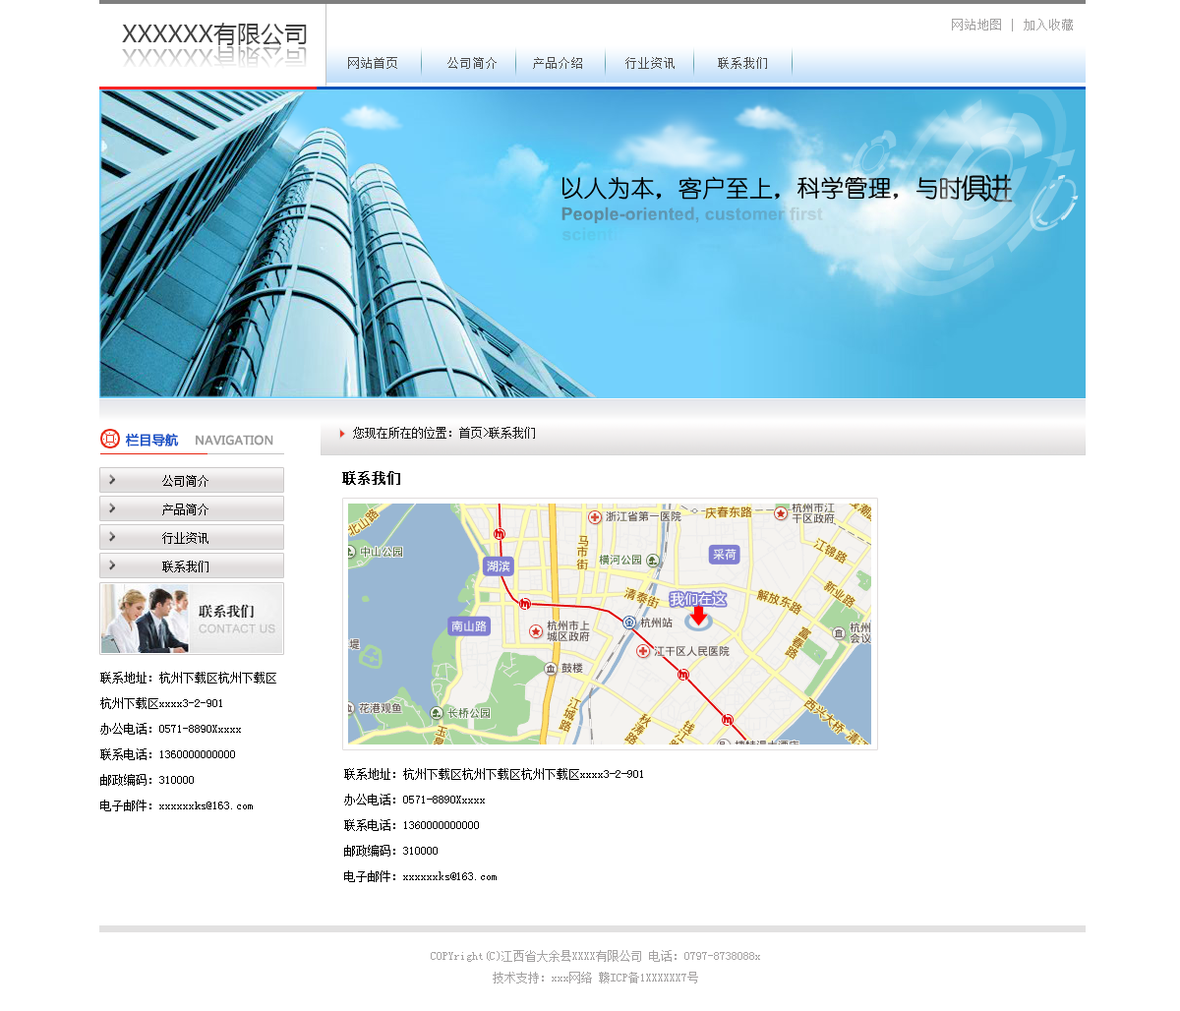
<style>
.page{position:relative;width:1180px;height:1011px;background:#ffffff}
.page>*{position:absolute;margin:0}
.t1{font:23.6px "MicrosoftYaHei";color:#3f3f3f}
.t2{font:12.8px "SimSun";color:#a3a2a2}
.t3{font:23.6px "MicrosoftYaHei"}
.t4{font:12.8px "SimSun";color:#4d4c4c}
.t5{font:11.8px "MicrosoftYaHei";color:#9a9a9a;font-weight:bold}
.t6{font:12.8px "MicrosoftYaHei";color:#1952c6;font-weight:bold}
.t7{font:11.8px "SimSun";color:#191919}
.t8{font:13.8px "SimSun";color:#000000;font-weight:bold}
.t9{font:11.8px "SimSun";color:#000000}
.t10{font:13.8px "MicrosoftYaHei";color:#fefcfc}
.t11{font:11.8px/25.6px "SimSun";color:#000000}
.t12{font:11.8px/21.6px "SimSun";color:#a4a2a2}
</style>
<div class="page">
<p class="t1" style="left:122px;top:23px;width:185px;height:22px">XXXXXX有限公司</p>
<p class="t2" style="left:952px;top:19px;width:121px;height:12px">网站地图 | 加入收藏</p>
<p class="t3" style="left:122px;top:46px;width:185px;height:23px">XXXXXX有限公司</p>
<p class="t4" style="left:348px;top:57px;width:419px;height:12px">网站首页       公司简介     产品介绍      行业资讯      联系我们</p>
<p class="t5" style="left:125px;top:433px;width:148px;height:13px"><span class="t6">栏目导航    </span>NAVIGATION</p>
<p class="t7" style="left:353px;top:427px;width:182px;height:11px">您现在所在的位置：首页&gt;联系我们</p>
<p class="t8" style="left:342px;top:471px;width:58px;height:14px">联系我们</p>
<p class="t9" style="left:162px;top:475px;width:46px;height:12px">公司简介</p>
<p class="t9" style="left:162px;top:503px;width:46px;height:12px">产品简介</p>
<p class="t9" style="left:162px;top:532px;width:46px;height:12px">行业资讯</p>
<p class="t9" style="left:162px;top:560px;width:46px;height:12px">联系我们</p>
<p class="t10" style="left:670px;top:592px;width:56px;height:15px">我们在这</p>
<p class="t11" style="left:100px;top:672px;width:176px;height:139px">联系地址：杭州下载区杭州下载区<br>杭州下载区xxxx3-2-901<br>办公电话：0571-8890Xxxxx<br>联系电话：1360000000000<br>邮政编码：310000<br>电子邮件：xxxxxxks@163.com</p>
<p class="t11" style="left:344px;top:768px;width:299px;height:114px">联系地址：杭州下载区杭州下载区杭州下载区xxxx3-2-901<br>办公电话：0571-8890Xxxxx<br>联系电话：1360000000000<br>邮政编码：310000<br>电子邮件：xxxxxxks@163.com</p>
<p class="t12" style="left:431px;top:950px;width:329px;height:33px;text-align:center">COPYright(C)江西省大余县XXXX有限公司 电话：0797-8738088x<br>技术支持：xxx网络 赣ICP备1XXXXXX7号</p>
</div>
